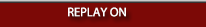
<style>
.page{position:relative;width:206px;height:27px;background:#7c0906}
.page>*{position:absolute;margin:0}
.t1{font:12.5px "MyriadPro-Regular";color:#ffffff}
</style>
<div class="page">
<p class="t1" style="left:68px;top:7px;width:58px;height:10px">REPLAY ON</p>
</div>
